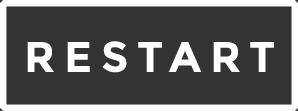
<style>
.page{position:relative;width:298px;height:111px;background:#333333}
.page>*{position:absolute;margin:0}
.t1{font:42.9px "Montserrat-Bold";letter-spacing:0.2em;color:#ffffff;text-transform:uppercase}
</style>
<div class="page">
<p class="t1" style="left:27px;top:41px;width:247px;height:32px">RESTART</p>
</div>
